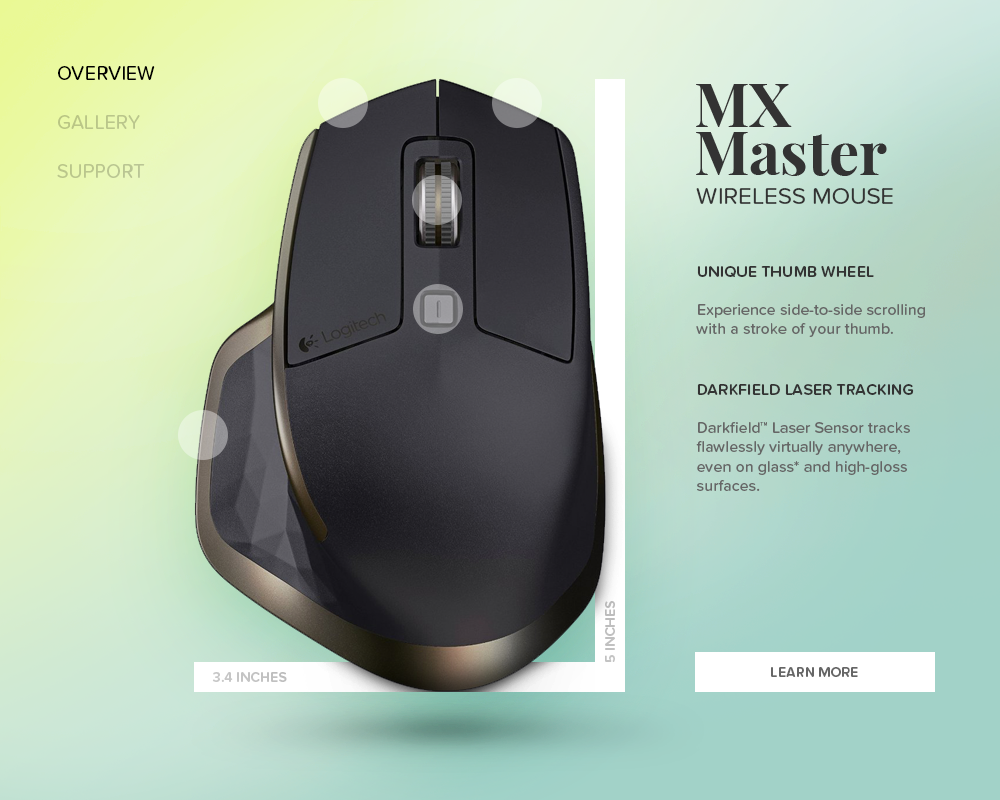
<style>
.page{position:relative;width:1000px;height:800px}
.page>*{position:absolute;margin:0}
.t1{font:20px "ProximaNovaSoft-Regular";color:#000000;text-transform:uppercase}
.t2{font:60px/48px "PlayfairDisplay-Bold";color:#333333}
.t3{font:20px "ProximaNovaSoft-Regular";color:#bac688;text-transform:uppercase}
.t4{font:20px "ProximaNovaSoft-Regular";color:#bac690;text-transform:uppercase}
.t5{font:24px "ProximaNovaSoft-Regular";color:#333333;text-transform:uppercase}
.t6{font:16px "ProximaNovaSoft-Medium";color:#666666}
.t7{font:16px "ProximaNovaSoft-Semibold";color:#333333;text-transform:uppercase}
.t8{font:14px "ProximaNovaSoft-Bold";color:#cccccc;text-transform:uppercase}
.t9{font:14px "ProximaNovaSoft-Bold";color:#666666;text-transform:uppercase}
</style>
<div class="page">
<p class="t1" style="left:58px;top:66px;width:97px;height:14px">Overview</p>
<p class="t2" style="left:696px;top:84px;width:191px;height:92px">MX <br>Master</p>
<p class="t3" style="left:58px;top:115px;width:82px;height:14px">Gallery</p>
<p class="t4" style="left:57px;top:164px;width:88px;height:14px">Support</p>
<p class="t5" style="left:696px;top:188px;width:197px;height:16px">Wireless mouse</p>
<p class="t6" style="left:696px;top:266px;width:229px;height:71px"><span class="t7">Unique thumb wheel<br><br></span>Experience side-to-side scrolling <br>with a stroke of your thumb.</p>
<p class="t6" style="left:696px;top:384px;width:218px;height:107px"><span class="t7">Darkfield Laser Tracking<br><br></span>Darkfield™ Laser Sensor tracks <br>flawlessly virtually anywhere, <br>even on glass* and high-gloss <br>surfaces.</p>
<p class="t8" style="left:605px;top:601px;width:10px;height:61px;rotate:-90deg">5 inches</p>
<p class="t8" style="left:212px;top:672px;width:75px;height:10px">3.4 inches</p>
<p class="t9" style="left:771px;top:667px;width:87px;height:10px">Learn more</p>
</div>
